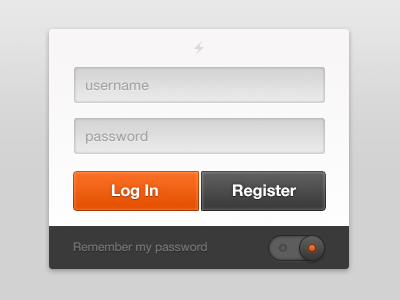
<style>
.page{position:relative;width:400px;height:300px}
.page>*{position:absolute;margin:0}
.t1{font:14px "HelveticaNeue-Medium";color:#a7a5a5}
.t2{font:16px "HelveticaNeue-Bold";color:#ffffff}
.t3{font:12px "HelveticaNeue";color:#6e6e6e}
</style>
<div class="page">
<p class="t1" style="left:86px;top:82px;width:63px;height:9px">username</p>
<p class="t1" style="left:86px;top:131px;width:62px;height:13px">password</p>
<p class="t2" style="left:112px;top:184px;width:46px;height:15px">Log In</p>
<p class="t2" style="left:233px;top:184px;width:63px;height:15px">Register</p>
<p class="t3" style="left:73px;top:242px;width:134px;height:12px">Remember my password</p>
</div>
